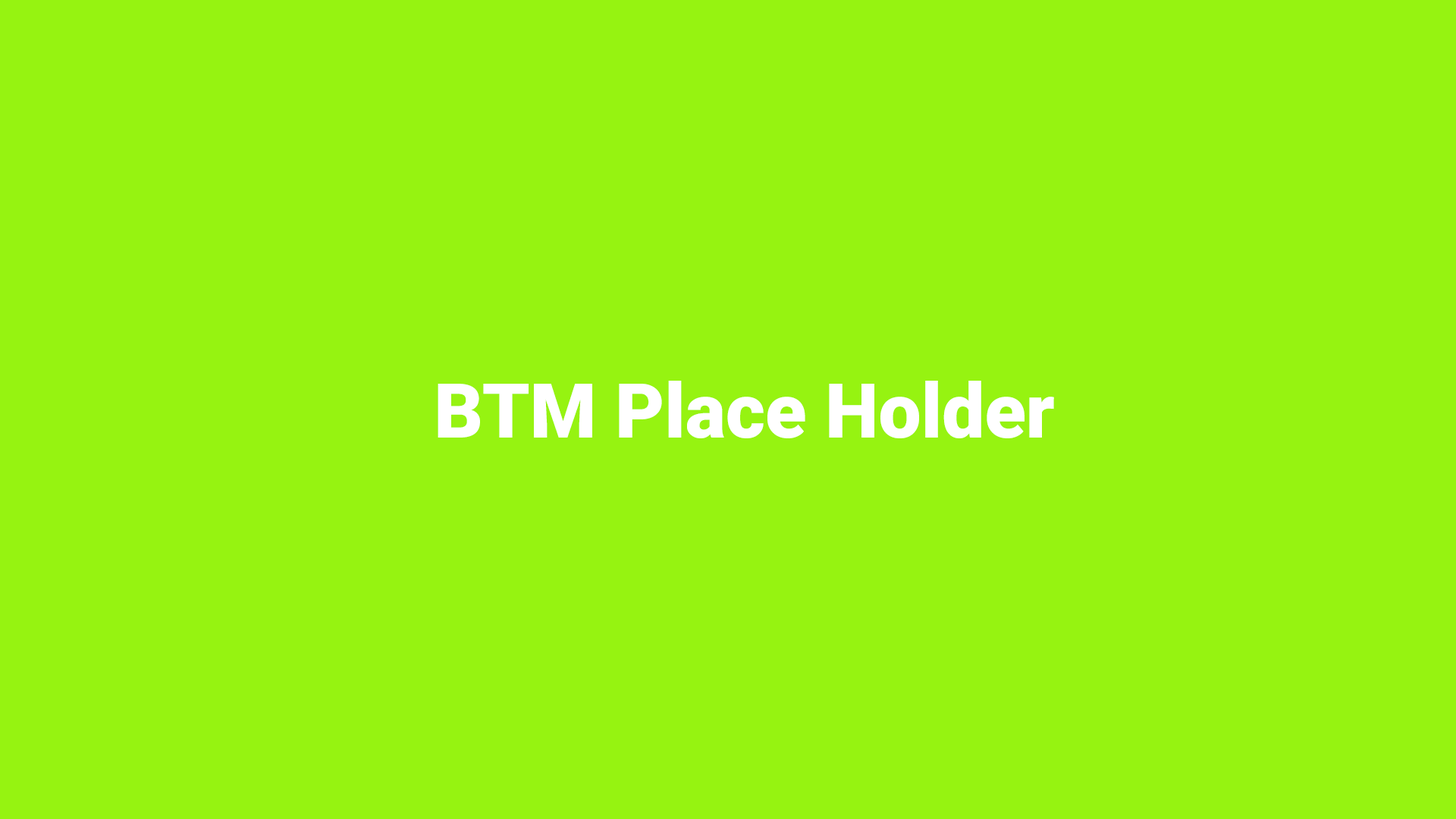
<style>
.page{position:relative;width:1456px;height:819px;background:#96f311}
.page>*{position:absolute;margin:0}
.t1{font:75.8px "Roboto-Black";color:#ffffff}
</style>
<div class="page">
<p class="t1" style="left:438px;top:381px;width:616px;height:57px">BTM Place Holder</p>
</div>
